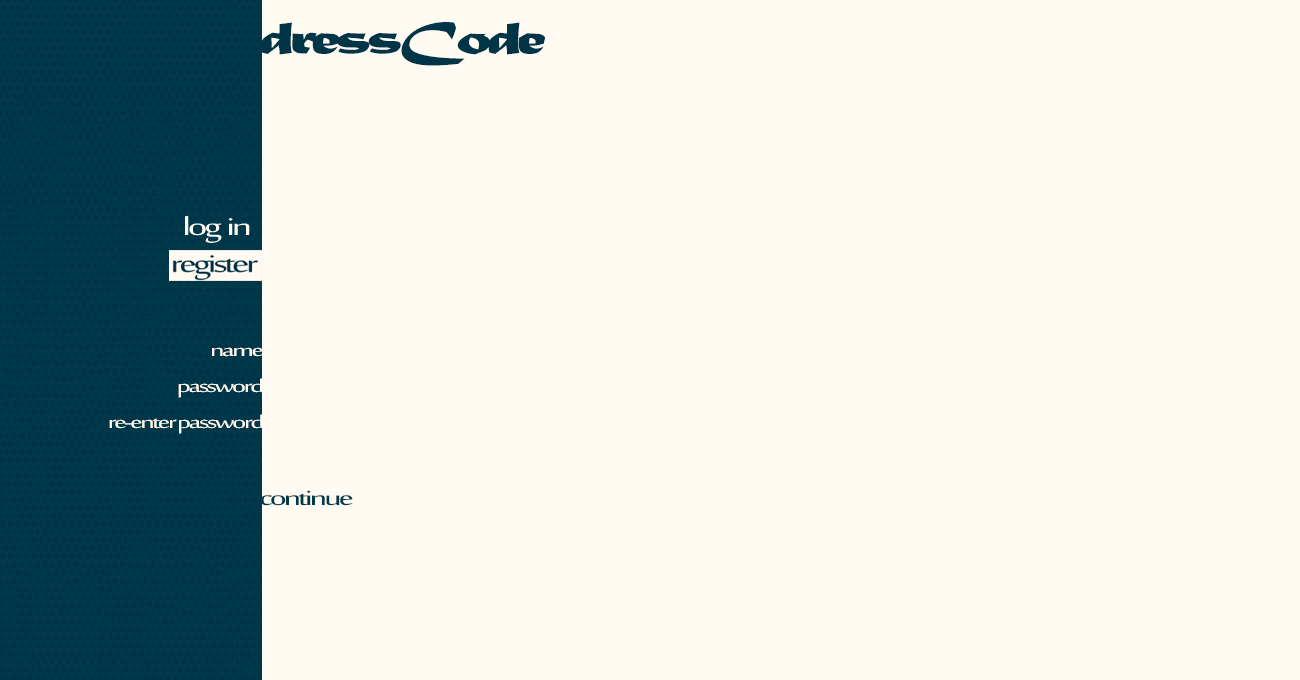
<style>
.page{position:relative;width:1300px;height:680px;background:#fffbf3}
.page>*{position:absolute;margin:0}
.t1{font:48px "MaturaMTScriptCapitals";letter-spacing:-0.075em;color:#003547;scale:1.5 1}
.t2{font:24px "SakkalMajalla";letter-spacing:-0.075em;color:#fffbf3;scale:1.5 1}
.t3{font:28.8px "SakkalMajalla";letter-spacing:-0.075em;color:#003a4a;scale:1.5 1}
</style>
<div class="page">
<p class="t1" style="left:261px;top:22px;width:284px;height:44px">dressCode</p>
<p class="t2" style="left:178px;top:347px;width:85px;height:51px">name<br>  password</p>
<p class="t2" style="left:109px;top:414px;width:154px;height:20px">re-enter password</p>
<p class="t3" style="left:260px;top:490px;width:93px;height:16px">continue</p>
</div>
